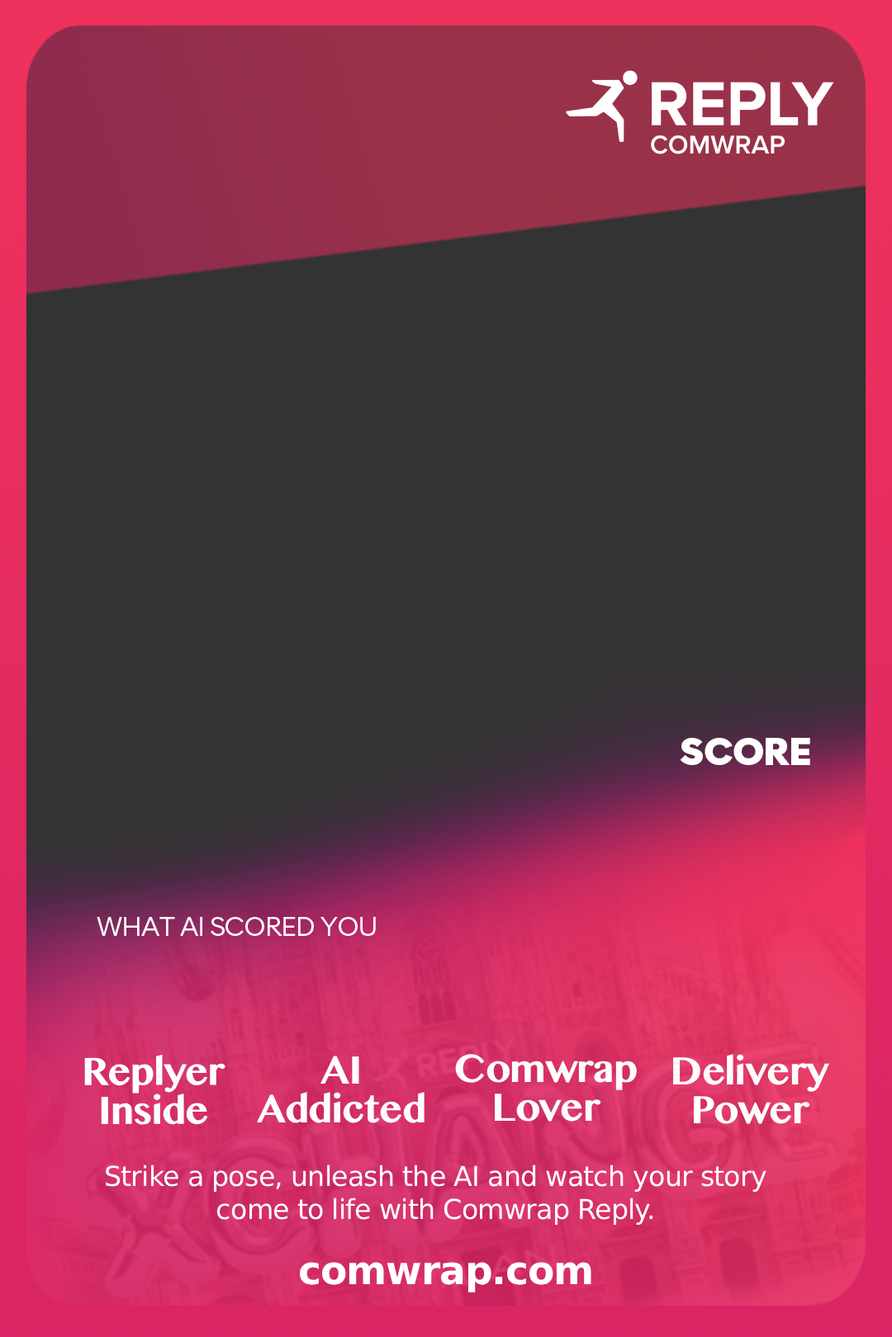
<style>
.page{position:relative;width:892px;height:1337px;background:#333333}
.page>*{position:absolute;margin:0}
.t1{font:35.7px "Alaska-ExtraBold";letter-spacing:-0.024em;color:#ffffff}
.t2{font:25.4px "Alaska-BookContrast";letter-spacing:-0.024em;color:#ffffff}
.t3{font:45.9px/39px "KhmerMN-Bold";letter-spacing:-0.024em;color:#fefefe}
.t4{font:27.5px "Alaska-Regular";letter-spacing:-0.024em;color:#ffffff}
.t5{font:39px "Alaska-SemiBold";letter-spacing:-0.024em;color:#ffffff}
</style>
<div class="page">
<p class="t1" style="left:679px;top:738px;width:131px;height:27px">SCORE</p>
<p class="t2" style="left:97px;top:917px;width:279px;height:19px">WHAT AI SCORED YOU</p>
<p class="t3" style="left:84px;top:1054px;width:141px;height:71px;text-align:center">Replyer<br>Inside</p>
<p class="t3" style="left:257px;top:1056px;width:167px;height:68px;text-align:center">AI<br>Addicted</p>
<p class="t3" style="left:455px;top:1054px;width:182px;height:68px;text-align:center">Comwrap<br>Lover</p>
<p class="t3" style="left:673px;top:1054px;width:157px;height:70px;text-align:center">Delivery<br>Power</p>
<p class="t4" style="left:106px;top:1165px;width:660px;height:60px;text-align:center">Strike a pose, unleash the AI and watch your story come to life with Comwrap Reply.</p>
<p class="t5" style="left:300px;top:1262px;width:291px;height:31px">comwrap.com</p>
</div>
